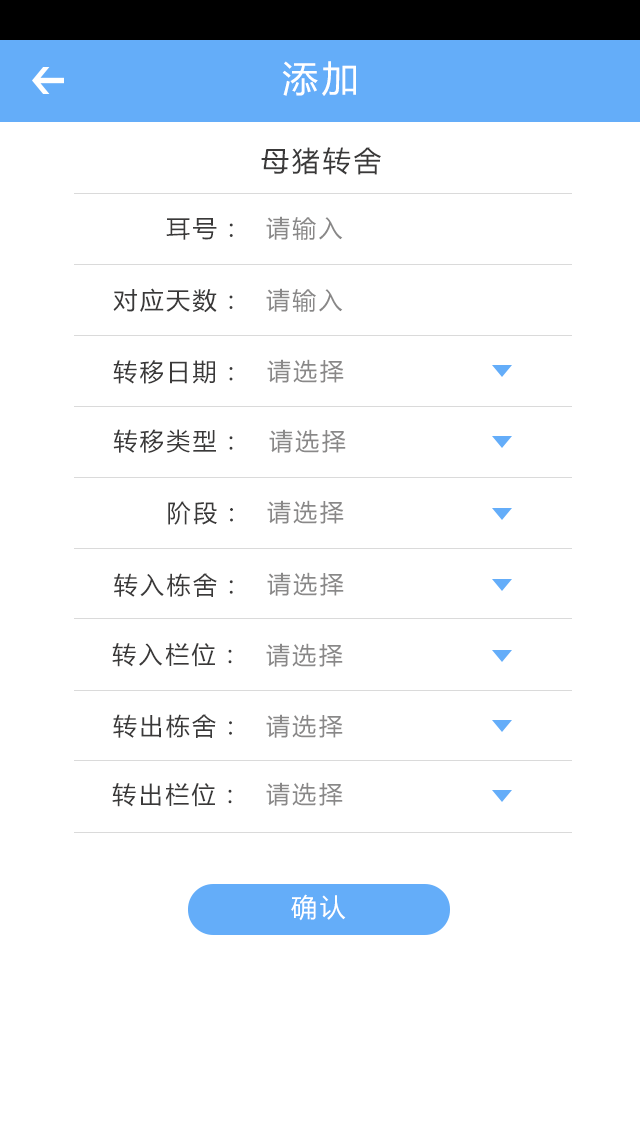
<style>
.page{position:relative;width:640px;height:1136px;background:#ffffff}
.page>*{position:absolute;margin:0}
.t1{font:36px "MicrosoftYaHei";letter-spacing:0.1em;color:#ffffff}
.t2{font:28px "MicrosoftYaHei";letter-spacing:0.1em;color:#3a3939}
.t3{font:24px "MicrosoftYaHei";letter-spacing:0.1em;color:#3a3939}
.t4{font:24px "MicrosoftYaHei";letter-spacing:0.1em;color:#898888}
.t5{font:26px "MicrosoftYaHei";letter-spacing:0.1em;color:#ffffff}
</style>
<div class="page">
<p class="t1" style="left:282px;top:61px;width:74px;height:35px">添加</p>
<p class="t2" style="left:261px;top:147px;width:120px;height:28px">母猪转舍</p>
<p class="t3" style="left:166px;top:218px;width:67px;height:22px">耳号：</p>
<p class="t4" style="left:266px;top:216px;width:77px;height:24px">请输入</p>
<p class="t3" style="left:113px;top:288px;width:120px;height:25px">对应天数：</p>
<p class="t4" style="left:266px;top:288px;width:77px;height:24px">请输入</p>
<p class="t3" style="left:113px;top:360px;width:120px;height:24px">转移日期：</p>
<p class="t4" style="left:267px;top:359px;width:77px;height:24px">请选择</p>
<p class="t3" style="left:113px;top:429px;width:120px;height:24px">转移类型：</p>
<p class="t4" style="left:269px;top:429px;width:77px;height:24px">请选择</p>
<p class="t3" style="left:168px;top:501px;width:65px;height:24px">阶段：</p>
<p class="t4" style="left:267px;top:500px;width:77px;height:24px">请选择</p>
<p class="t3" style="left:114px;top:573px;width:119px;height:24px">转入栋舍：</p>
<p class="t4" style="left:267px;top:572px;width:77px;height:24px">请选择</p>
<p class="t3" style="left:112px;top:643px;width:120px;height:24px">转入栏位：</p>
<p class="t4" style="left:266px;top:643px;width:77px;height:24px">请选择</p>
<p class="t3" style="left:113px;top:714px;width:119px;height:24px">转出栋舍：</p>
<p class="t4" style="left:266px;top:714px;width:77px;height:24px">请选择</p>
<p class="t3" style="left:112px;top:783px;width:120px;height:24px">转出栏位：</p>
<p class="t4" style="left:266px;top:782px;width:77px;height:24px">请选择</p>
<p class="t5" style="left:291px;top:894px;width:55px;height:27px">确认</p>
</div>
